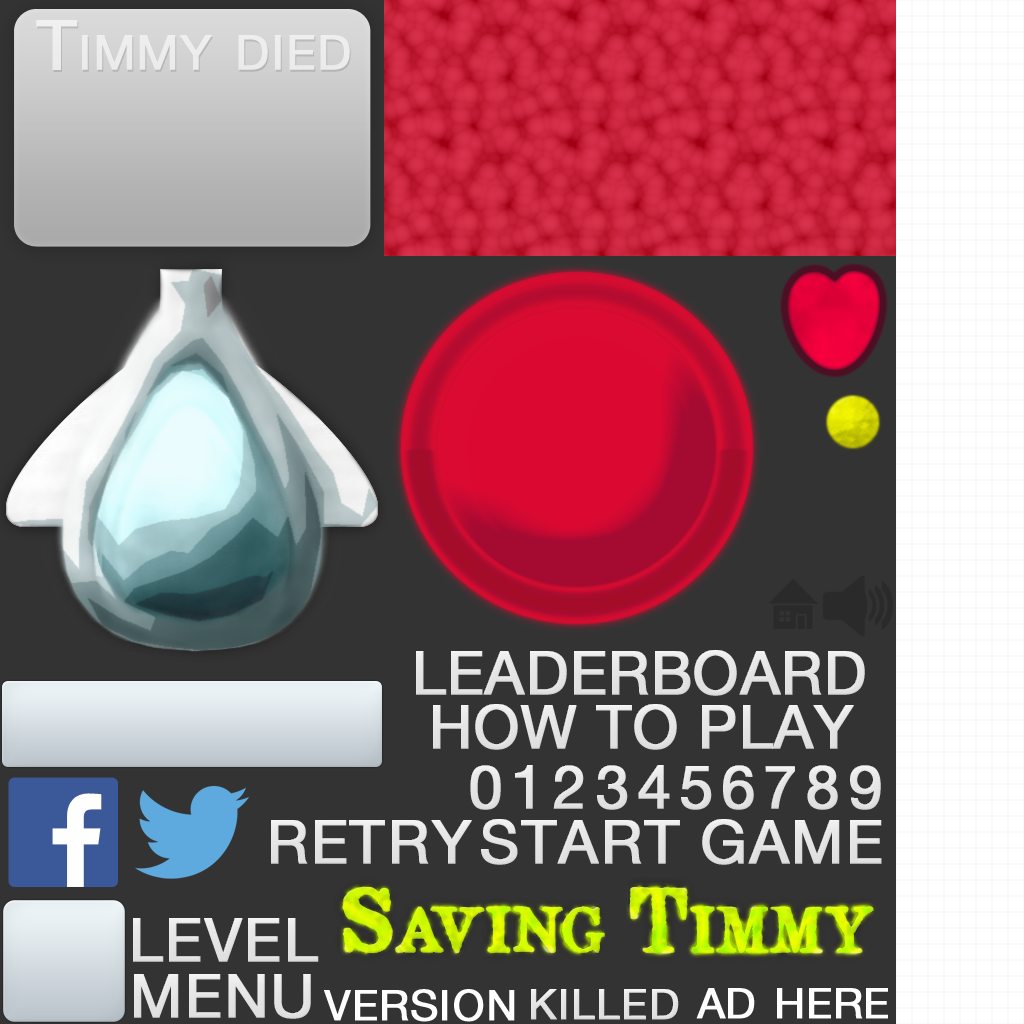
<style>
.page{position:relative;width:1024px;height:1024px;background:#333333}
.page>*{position:absolute;margin:0}
.t1{font:68px "HelveticaNeueLTPro-Roman";letter-spacing:0.02em;color:#ffffff;font-variant:small-caps;font-weight:bold}
.t2{font:60px "HelveticaNeueLTPro-Roman";color:#e5e5e5;font-variant:small-caps;font-weight:bold}
.t3{font:60px "HelveticaNeueLTPro-Roman";color:#e6e6e6;font-variant:small-caps;font-weight:bold}
.t4{font:60px "HelveticaNeueLTPro-Roman";letter-spacing:0.12em;color:#e5e5e5;font-variant:small-caps;font-weight:bold}
.t5{font:60px "HelveticaNeueLTPro-Roman";letter-spacing:0.02em;color:#e6e6e6;font-variant:small-caps;font-weight:bold}
.t6{font:60px "HelveticaNeueLTPro-Roman";letter-spacing:0.02em;color:#e5e5e5;font-variant:small-caps;font-weight:bold}
.t7{font:72px "Opera-Lyrics-Smooth";color:#d0fa02;font-variant:small-caps;font-weight:bold}
.t8{font:60px "HelveticaNeueLTPro-Roman";letter-spacing:0.02em;color:#ffffff;font-variant:small-caps;font-weight:bold}
.t9{font:60px "HelveticaNeueLTPro-Roman";color:#ffffff;font-variant:small-caps;font-weight:bold}
</style>
<div class="page">
<p class="t1" style="left:36px;top:20px;width:314px;height:50px">Timmy died</p>
<p class="t2" style="left:416px;top:650px;width:449px;height:46px">LEADERBOARD</p>
<p class="t3" style="left:433px;top:704px;width:421px;height:46px">HOW TO PLAY</p>
<p class="t4" style="left:470px;top:765px;width:411px;height:45px">0123456789</p>
<p class="t5" style="left:271px;top:820px;width:201px;height:44px">RETRY</p>
<p class="t6" style="left:481px;top:819px;width:401px;height:46px">START GAME</p>
<p class="t7" style="left:342px;top:886px;width:532px;height:67px">Saving Timmy</p>
<p class="t6" style="left:133px;top:918px;width:186px;height:44px">LEVEL</p>
<p class="t6" style="left:134px;top:974px;width:177px;height:45px">MENU</p>
<p class="t8" style="left:324px;top:989px;width:191px;height:33px">version</p>
<p class="t6" style="left:531px;top:989px;width:148px;height:31px">killed</p>
<p class="t9" style="left:696px;top:988px;width:192px;height:31px">ad here</p>
</div>
